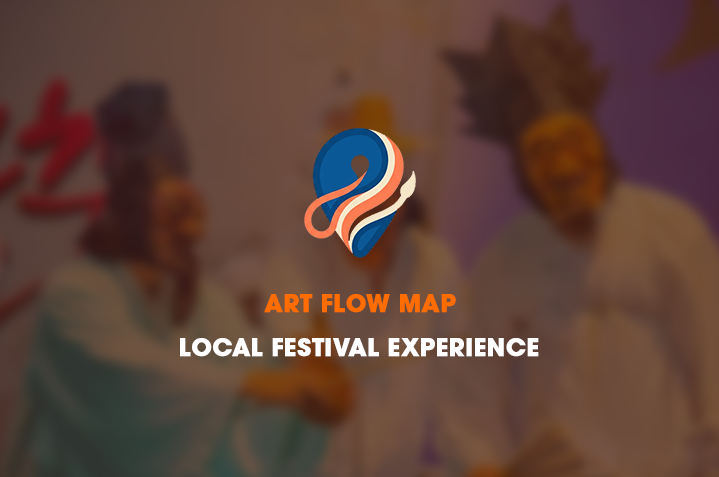
<style>
.page{position:relative;width:719px;height:477px}
.page>*{position:absolute;margin:0}
.t1{font:24px "AvantGardeLT-Bold";color:#ff6c00;font-weight:bold}
.t2{font:24px "AvantGardeLT-Bold";color:#ffffff;font-weight:bold}
</style>
<div class="page">
<p class="t1" style="left:264px;top:294px;width:192px;height:19px">ART FLOW MAP</p>
<p class="t2" style="left:180px;top:338px;width:359px;height:19px">LOCAL FESTIVAL EXPERIENCE</p>
</div>
